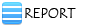
<style>
.page{position:relative;width:85px;height:26px;background:#ffffff}
.page>*{position:absolute;margin:0}
.t1{font:14px "TempusSansITC";color:#000000}
</style>
<div class="page">
<p class="t1" style="left:25px;top:8px;width:51px;height:10px">REPORT</p>
</div>
